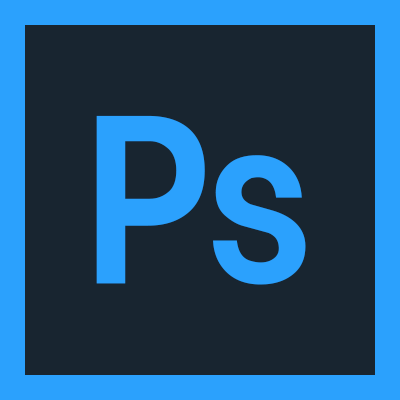
<style>
.page{position:relative;width:400px;height:400px;background:#182530}
.page>*{position:absolute;margin:0}
.t1{font:208.3px "HGPSoeiKakugothicUB";letter-spacing:-0.05em;color:#2ba1fd;scale:1.12 1}
</style>
<div class="page">
<p class="t1" style="left:96px;top:115px;width:210px;height:170px">Ps</p>
</div>
